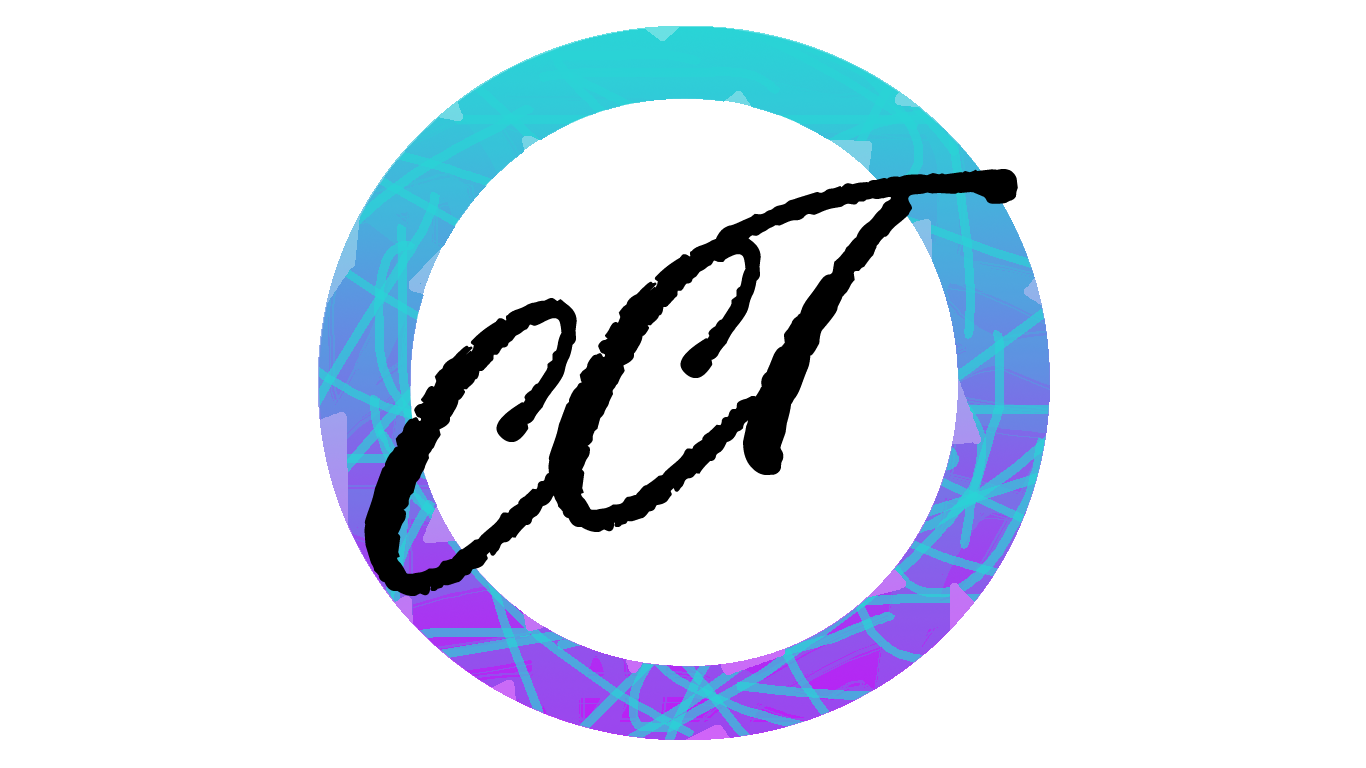
<style>
.page{position:relative;width:1366px;height:768px;background:#ffffff}
.page>*{position:absolute;margin:0}
.t1{font:450px "RageItalic";color:#000000}
</style>
<div class="page">
<p class="t1" style="left:711px;top:169px;width:307px;height:306px">T</p>
<p class="t1" style="left:548px;top:234px;width:213px;height:298px">C</p>
<p class="t1" style="left:364px;top:298px;width:213px;height:298px">C</p>
</div>
